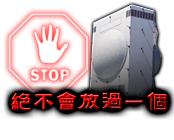
<style>
.page{position:relative;width:174px;height:140px;background:#ffffff}
.page>*{position:absolute;margin:0}
.t1{font:22.6px "FZZJ-MSHLFW"}
</style>
<div class="page">
<p class="t1" style="left:11px;top:92px;width:156px;height:20px">绝不会放过一个</p>
</div>
